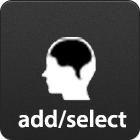
<style>
.page{position:relative;width:140px;height:140px}
.page>*{position:absolute;margin:0}
.t1{font:24px "MyriadPro-Semibold";color:#ffffff}
</style>
<div class="page">
<p class="t1" style="left:18px;top:109px;width:109px;height:19px">add/select</p>
</div>
